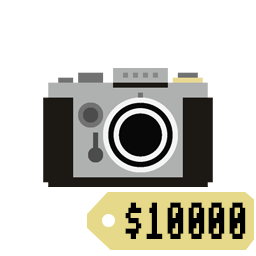
<style>
.page{position:relative;width:256px;height:256px;background:#ffffff}
.page>*{position:absolute;margin:0}
.t1{font:41.7px "November";color:#000000}
</style>
<div class="page">
<p class="t1" style="left:125px;top:202px;width:121px;height:37px">$10000</p>
</div>
